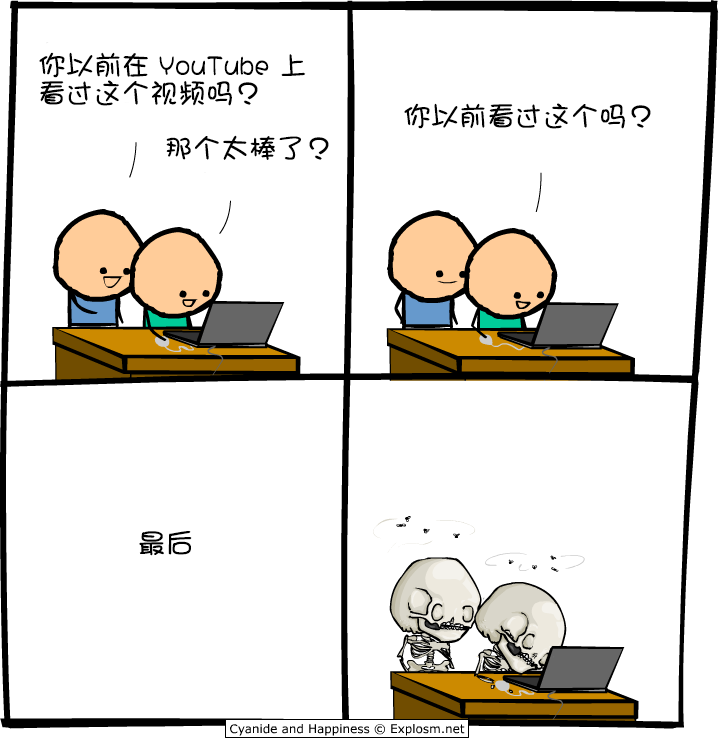
<style>
.page{position:relative;width:720px;height:740px;background:#ffffff}
.page>*{position:absolute;margin:0}
.t1{font:28px/28px "DFGirl";color:#000000}
.t2{font:28px "DFGirl";color:#000000}
</style>
<div class="page">
<p class="t1" style="left:39px;top:52px;width:267px;height:54px">你以前在 YouTube 上<br>看过这个视频吗？</p>
<p class="t2" style="left:404px;top:103px;width:247px;height:26px">你以前看过这个吗？</p>
<p class="t2" style="left:166px;top:135px;width:163px;height:25px">那个太棒了？</p>
<p class="t2" style="left:139px;top:531px;width:53px;height:25px">最后</p>
</div>
